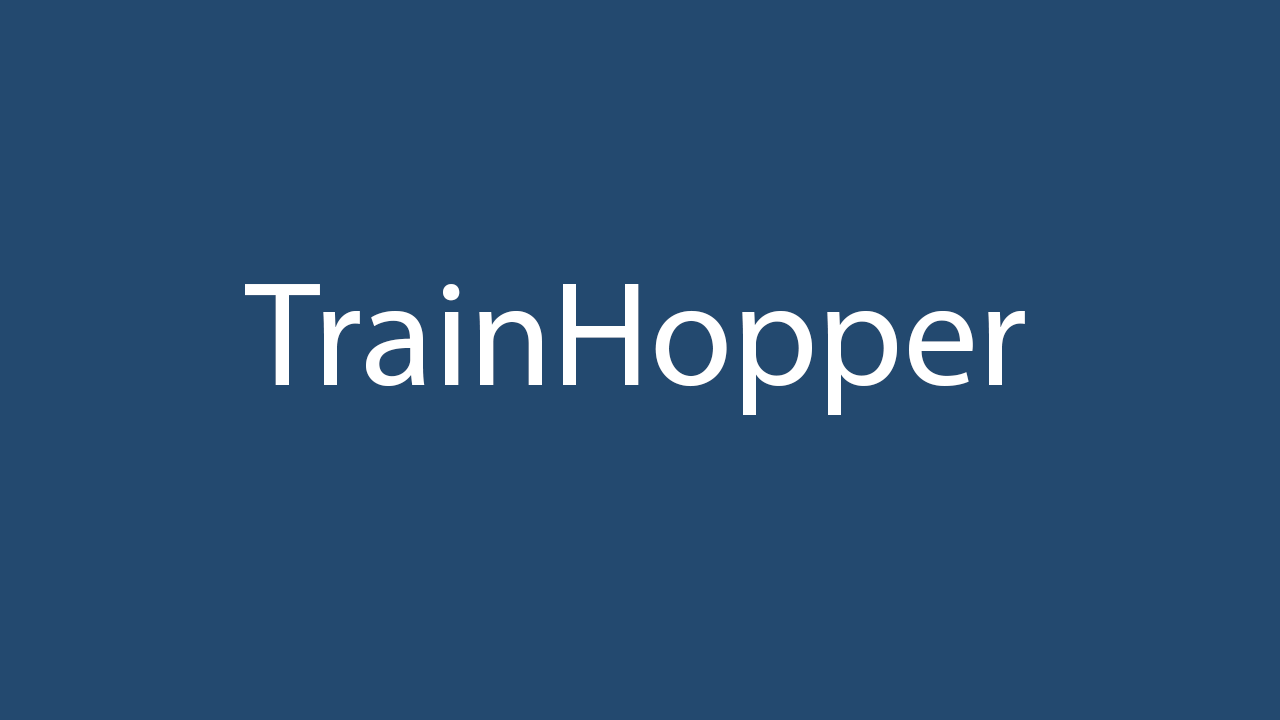
<style>
.page{position:relative;width:1280px;height:720px;background:#23496f}
.page>*{position:absolute;margin:0}
.t1{font:150px "MyriadPro-Regular";color:#ffffff}
</style>
<div class="page">
<p class="t1" style="left:245px;top:284px;width:780px;height:131px">TrainHopper</p>
</div>
